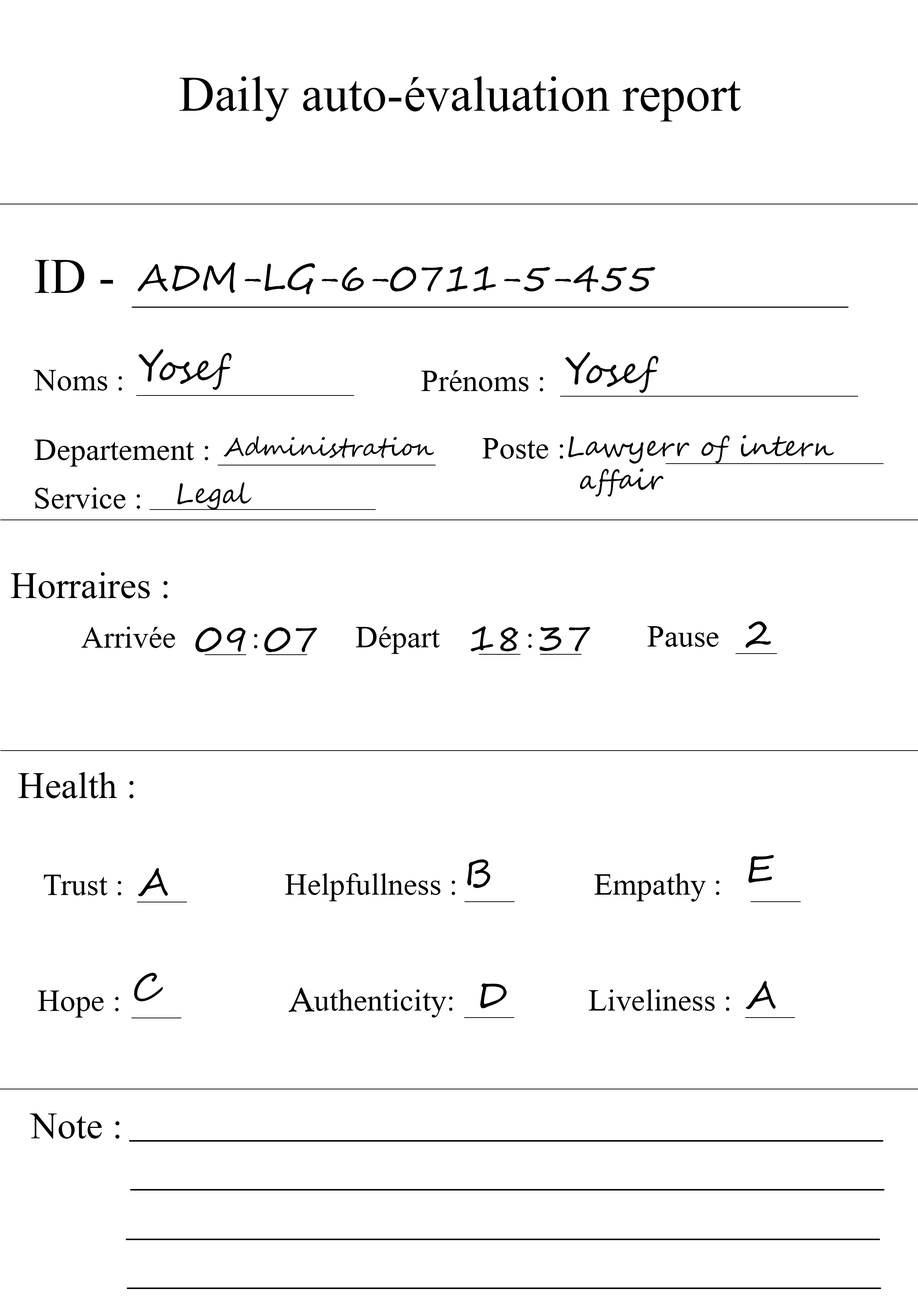
<style>
.page{position:relative;width:918px;height:1299px;background:#ffffff}
.page>*{position:absolute;margin:0}
.t1{font:74px "Microsoft-Himalaya";color:#000000}
.t2{font:37px "SegoeScript";color:#000000}
.t3{font:46.3px "Microsoft-Himalaya";color:#000000}
.t4{font:24.7px "SegoeScript";color:#000000}
.t5{font:27.8px "SegoeScript";color:#000000}
.t6{font:55.5px "Microsoft-Himalaya";color:#000000}
.t7{font:37px "HighTowerText-Reg";color:#000000}
</style>
<div class="page">
<p class="t1" style="left:180px;top:76px;width:561px;height:45px">Daily auto-évaluation report</p>
<p class="t1" style="left:35px;top:260px;width:78px;height:33px">ID -</p>
<p class="t2" style="left:137px;top:262px;width:518px;height:32px">ADM-LG-6-0711-5-455</p>
<p class="t2" style="left:138px;top:349px;width:94px;height:41px">Yosef</p>
<p class="t2" style="left:565px;top:352px;width:94px;height:41px">Yosef</p>
<p class="t3" style="left:34px;top:370px;width:88px;height:21px">Noms :</p>
<p class="t3" style="left:421px;top:370px;width:122px;height:21px">Prénoms :</p>
<p class="t4" style="left:224px;top:436px;width:210px;height:22px">Administration</p>
<p class="t3" style="left:482px;top:438px;width:81px;height:21px">Poste :</p>
<p class="t5" style="left:568px;top:435px;width:266px;height:61px">Lawyerr of intern<br> affair</p>
<p class="t3" style="left:34px;top:439px;width:174px;height:27px">Departement :</p>
<p class="t5" style="left:177px;top:482px;width:75px;height:28px">Legal</p>
<p class="t3" style="left:35px;top:487px;width:105px;height:22px">Service :</p>
<p class="t6" style="left:11px;top:572px;width:157px;height:26px">Horraires :</p>
<p class="t3" style="left:81px;top:626px;width:94px;height:22px">Arrivée</p>
<p class="t2" style="left:195px;top:627px;width:122px;height:25px">09 07</p>
<p class="t3" style="left:356px;top:626px;width:84px;height:28px">Départ</p>
<p class="t2" style="left:471px;top:626px;width:120px;height:25px">18 37</p>
<p class="t3" style="left:648px;top:626px;width:71px;height:21px">Pause</p>
<p class="t2" style="left:746px;top:621px;width:25px;height:27px">2</p>
<p class="t3" style="left:254px;top:634px;width:4px;height:14px">:</p>
<p class="t3" style="left:528px;top:633px;width:4px;height:15px">:</p>
<p class="t6" style="left:18px;top:772px;width:116px;height:26px">Health :</p>
<p class="t2" style="left:748px;top:855px;width:26px;height:28px">E</p>
<p class="t2" style="left:138px;top:868px;width:30px;height:28px">A</p>
<p class="t2" style="left:467px;top:859px;width:24px;height:29px">B</p>
<p class="t3" style="left:44px;top:874px;width:77px;height:21px">Trust :</p>
<p class="t3" style="left:285px;top:873px;width:170px;height:28px">Helpfullness :</p>
<p class="t3" style="left:594px;top:873px;width:126px;height:28px">Empathy :</p>
<p class="t2" style="left:134px;top:973px;width:29px;height:28px">C</p>
<p class="t7" style="left:288px;top:987px;width:27px;height:25px">A</p>
<p class="t3" style="left:301px;top:989px;width:152px;height:28px">authenticity:</p>
<p class="t2" style="left:480px;top:983px;width:27px;height:25px">D</p>
<p class="t3" style="left:589px;top:989px;width:141px;height:22px">Liveliness :</p>
<p class="t2" style="left:746px;top:981px;width:30px;height:28px">A</p>
<p class="t3" style="left:38px;top:990px;width:81px;height:27px">Hope :</p>
<p class="t6" style="left:30px;top:1113px;width:90px;height:25px">Note :</p>
</div>
